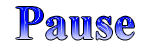
<style>
.page{position:relative;width:150px;height:50px;background:#ffffff}
.page>*{position:absolute;margin:0}
.t1{font:48px "TimesNewRomanPS-BoldMT"}
</style>
<div class="page">
<p class="t1" style="left:16px;top:7px;width:118px;height:33px">Pause</p>
</div>
